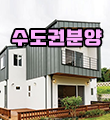
<style>
.page{position:relative;width:110px;height:120px}
.page>*{position:absolute;margin:0}
.t1{font:18px "Typo_SsangmunDong_B";letter-spacing:0.01em;color:#fcb0fc}
</style>
<div class="page">
<p class="t1" style="left:12px;top:29px;width:90px;height:17px">수도권분양</p>
</div>
